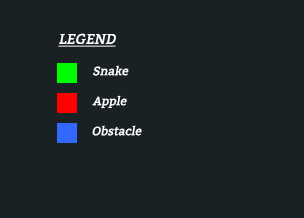
<style>
.page{position:relative;width:304px;height:218px;background:#192124}
.page>*{position:absolute;margin:0}
.t1{font:14px "Bitter-Regular";color:#ffffff;font-style:italic;text-decoration:underline}
.t2{font:12px "Bitter-Regular";color:#ffffff;font-style:italic}
</style>
<div class="page">
<p class="t1" style="left:58px;top:33px;width:58px;height:14px">LEGEND</p>
<p class="t2" style="left:93px;top:65px;width:36px;height:11px">Snake</p>
<p class="t2" style="left:92px;top:95px;width:35px;height:13px">Apple</p>
<p class="t2" style="left:92px;top:125px;width:50px;height:11px">Obstacle</p>
</div>
